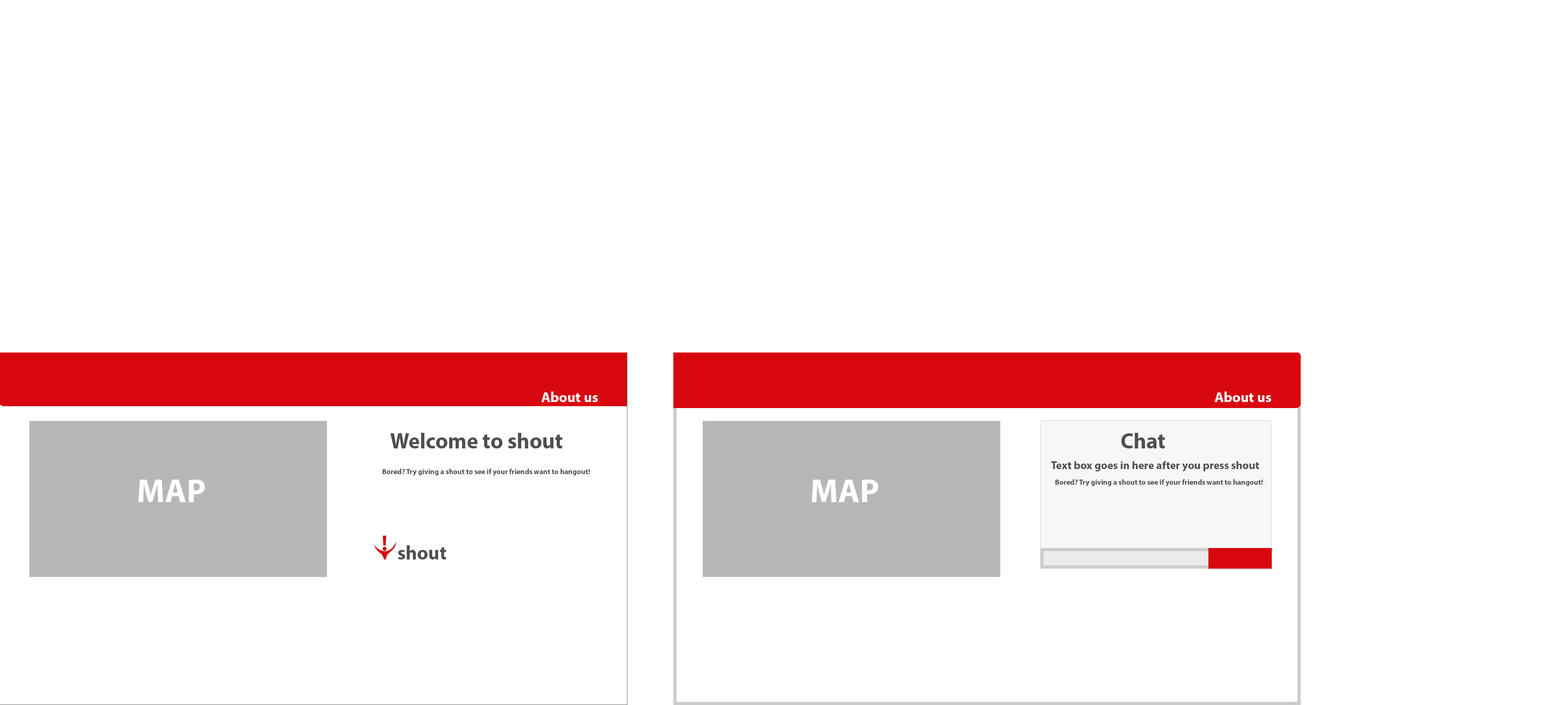
<style>
.page{position:relative;width:1568px;height:705px;background:#ffffff}
.page>*{position:absolute;margin:0}
.t1{font:14.3px "MyriadPro-Bold";color:#ffffff}
.t2{font:21.8px "MyriadPro-Bold";color:#4f4f4f}
.t3{font:11px "MyriadPro-Bold";color:#4f4f4f}
.t4{font:7.3px "MyriadPro-Bold";color:#4f4f4f}
.t5{font:33.1px "MyriadPro-Bold";color:#ffffff}
.t6{font:22.2px "MyriadPro-Bold";color:#d8070f}
.t7{font:19.5px "MyriadPro-Bold";color:#4f4f4f}
</style>
<div class="page">
<p class="t1" style="left:541px;top:392px;width:57px;height:10px">About us</p>
<p class="t1" style="left:1214px;top:392px;width:57px;height:10px">About us</p>
<p class="t2" style="left:390px;top:433px;width:173px;height:16px">Welcome to shout</p>
<p class="t2" style="left:1121px;top:433px;width:44px;height:16px">Chat</p>
<p class="t3" style="left:1051px;top:462px;width:208px;height:10px">Text box goes in here after you press shout</p>
<p class="t4" style="left:383px;top:469px;width:207px;height:7px">Bored? Try giving a shout to see if your friends want to hangout!</p>
<p class="t5" style="left:138px;top:480px;width:67px;height:22px">MAP</p>
<p class="t5" style="left:812px;top:480px;width:66px;height:22px">MAP</p>
<p class="t4" style="left:1055px;top:479px;width:208px;height:8px">Bored? Try giving a shout to see if your friends want to hangout!</p>
<p class="t6" style="left:383px;top:536px;width:4px;height:15px">!</p>
<p class="t7" style="left:398px;top:546px;width:48px;height:14px">shout</p>
</div>
